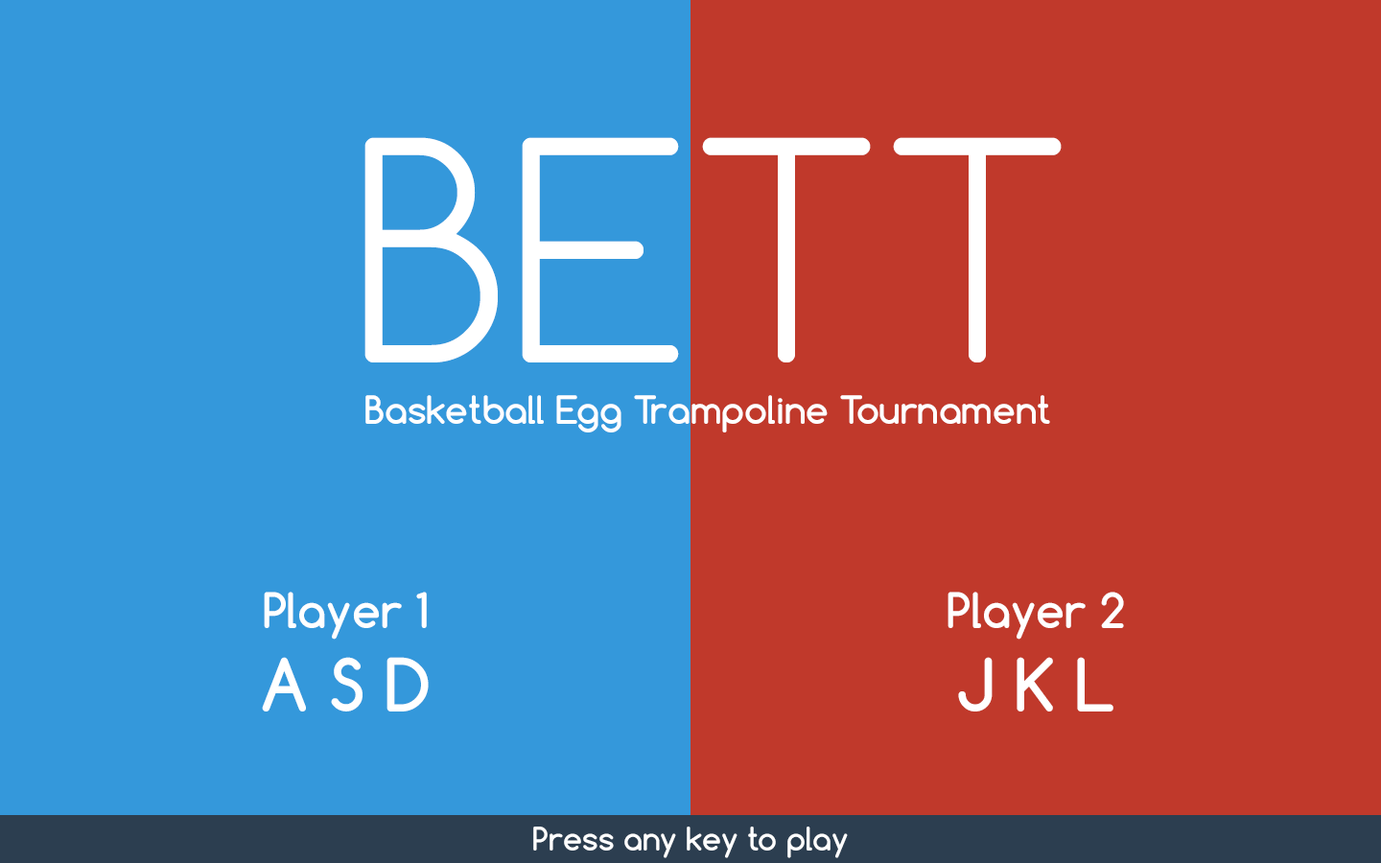
<style>
.page{position:relative;width:1381px;height:863px;background:#c0392b}
.page>*{position:absolute;margin:0}
.t1{font:287.8px "Comfortaa-Light";color:#ffffff}
.t2{font:36.5px "Comfortaa-Bold";color:#ffffff}
.t3{font:46px "Comfortaa-Bold";color:#ffffff}
.t4{font:69.1px "Comfortaa-Bold";color:#ffffff}
.t5{font:30.7px "Comfortaa-Bold";color:#ffffff}
</style>
<div class="page">
<p class="t1" style="left:365px;top:137px;width:697px;height:226px">BETT</p>
<p class="t2" style="left:365px;top:395px;width:685px;height:38px">Basketball Egg Trampoline Tournament</p>
<p class="t3" style="left:262px;top:592px;width:167px;height:120px;text-align:center">Player 1<br><span class="t4">A S D</span></p>
<p class="t3" style="left:948px;top:592px;width:176px;height:120px;text-align:center">Player 2<br><span class="t4">J K L</span></p>
<p class="t5" style="left:533px;top:827px;width:315px;height:31px">Press any key to play</p>
</div>
